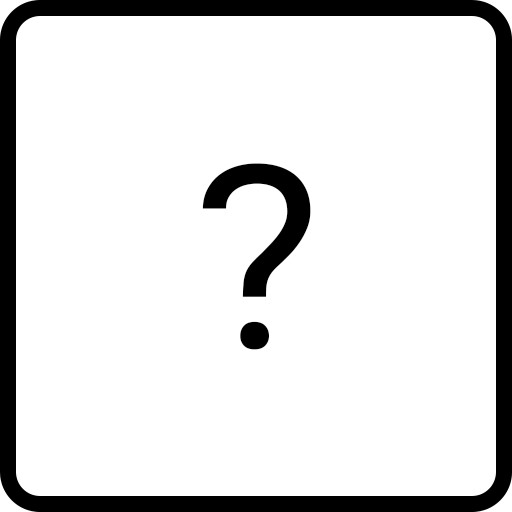
<style>
.page{position:relative;width:512px;height:512px;background:#ffffff}
.page>*{position:absolute;margin:0}
.t1{font:256px "RobotoMono-Regular";letter-spacing:-0.02em;color:#000000}
</style>
<div class="page">
<p class="t1" style="left:202px;top:163px;width:109px;height:187px">?</p>
</div>
